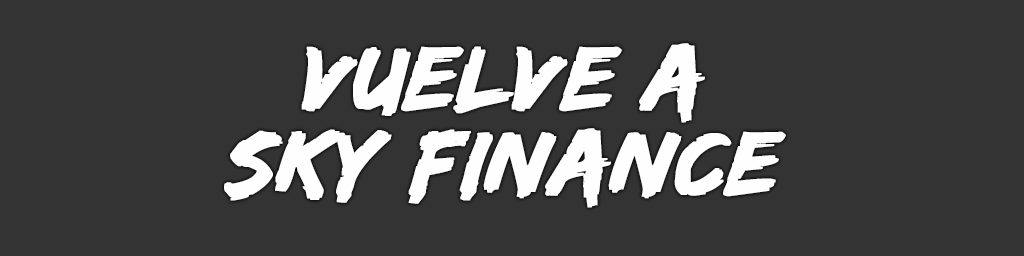
<style>
.page{position:relative;width:1024px;height:256px;background:#333333}
.page>*{position:absolute;margin:0}
.t1{font:94px/85px "EdoSZ";color:#fefefe;font-weight:bold;font-style:italic;scale:1.04 1}
</style>
<div class="page">
<p class="t1" style="left:224px;top:43px;width:562px;height:165px;text-align:center">vuelve a<br>sky finance</p>
</div>
